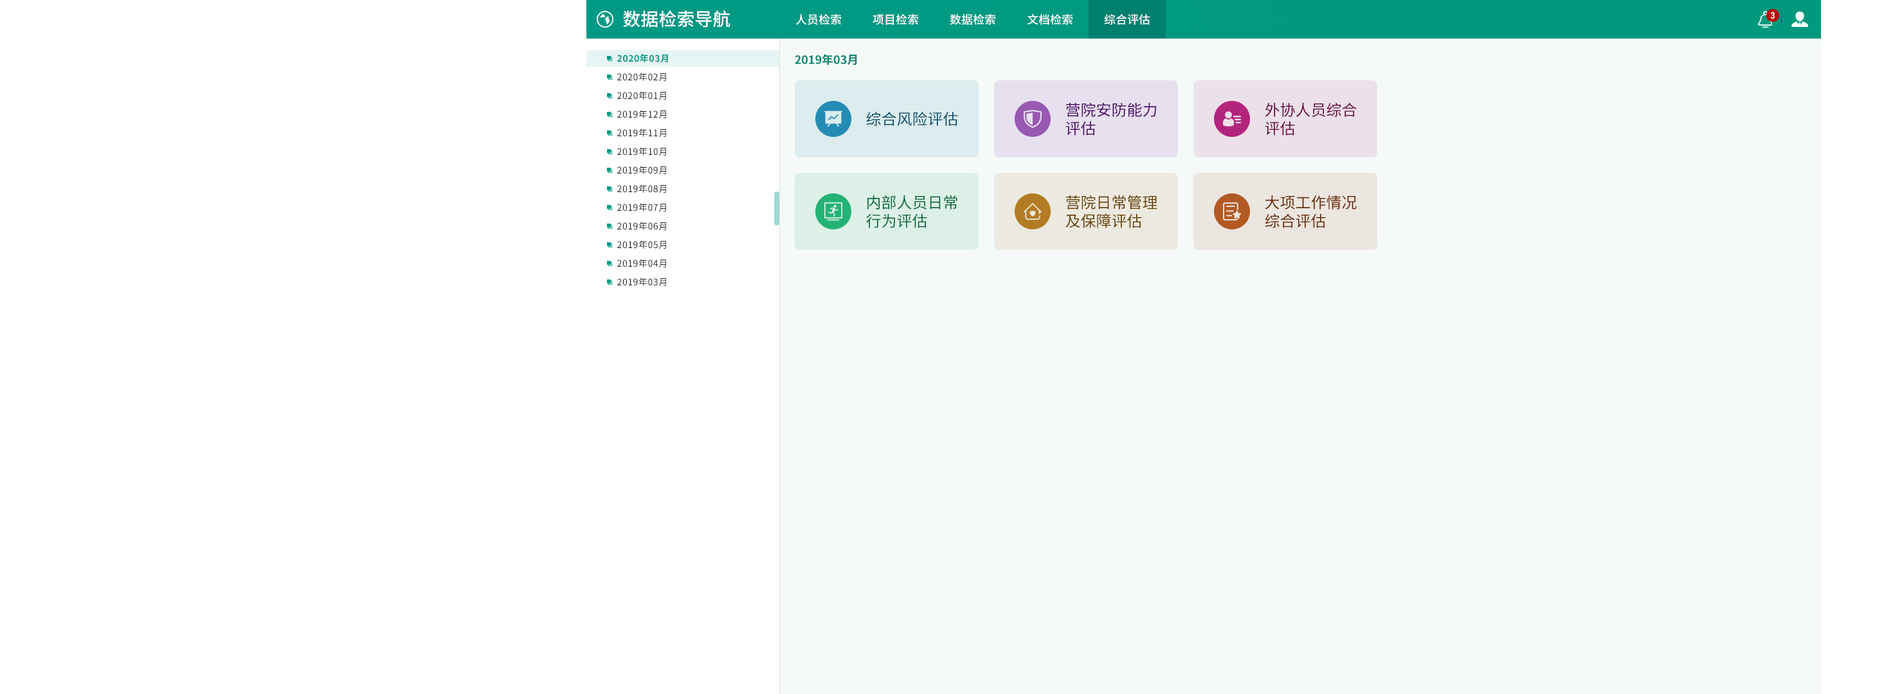
<style>
.page{position:relative;width:1893px;height:694px;background:#f5faf9}
.page>*{position:absolute;margin:0}
.t1{font:18px "NotoSansHans-Medium";color:#ffffff}
.t2{font:11.6px "NotoSansHans-Medium";color:#ffffff}
.t3{font:9px "Bahnschrift";color:#ffffff}
.t4{font:9px "NotoSansHans-Bold";letter-spacing:0.04em;color:#009985}
.t5{font:11.6px "NotoSansHans-Bold";color:#00806f}
.t6{font:9px "NotoSansHans-Regular";letter-spacing:0.04em;color:#1a1a1a}
.t7{font:15.4px "NotoSansHans-Regular";color:#004b66}
.t8{font:15.4px "NotoSansHans-Regular";color:#470066}
.t9{font:15.4px "NotoSansHans-Regular";color:#66003f}
.t10{font:15.4px "NotoSansHans-Regular";color:#00663a}
.t11{font:15.4px "NotoSansHans-Regular";color:#663f00}
.t12{font:15.4px "NotoSansHans-Regular";color:#662700}
</style>
<div class="page">
<p class="t1" style="left:623px;top:10px;width:107px;height:18px">数据检索导航</p>
<p class="t2" style="left:795px;top:14px;width:46px;height:11px">人员检索</p>
<p class="t2" style="left:872px;top:14px;width:46px;height:11px">项目检索</p>
<p class="t2" style="left:950px;top:14px;width:45px;height:11px">数据检索</p>
<p class="t2" style="left:1027px;top:14px;width:45px;height:11px">文档检索</p>
<p class="t2" style="left:1104px;top:14px;width:46px;height:11px">综合评估</p>
<p class="t3" style="left:1770px;top:12px;width:4px;height:7px">3</p>
<p class="t4" style="left:617px;top:54px;width:51px;height:9px">2020年03月</p>
<p class="t5" style="left:795px;top:54px;width:62px;height:11px">2019年03月</p>
<p class="t6" style="left:617px;top:73px;width:49px;height:9px">2020年02月</p>
<p class="t6" style="left:617px;top:91px;width:49px;height:9px">2020年01月</p>
<p class="t6" style="left:617px;top:110px;width:49px;height:9px">2019年12月</p>
<p class="t7" style="left:866px;top:111px;width:92px;height:15px">综合风险评估</p>
<p class="t8" style="left:1065px;top:102px;width:91px;height:34px">营院安防能力<br>评估</p>
<p class="t9" style="left:1264px;top:103px;width:92px;height:33px">外协人员综合<br>评估</p>
<p class="t6" style="left:617px;top:129px;width:49px;height:9px">2019年11月</p>
<p class="t6" style="left:617px;top:147px;width:49px;height:9px">2019年10月</p>
<p class="t6" style="left:617px;top:166px;width:49px;height:9px">2019年09月</p>
<p class="t6" style="left:617px;top:184px;width:49px;height:10px">2019年08月</p>
<p class="t10" style="left:866px;top:195px;width:91px;height:33px">内部人员日常<br>行为评估</p>
<p class="t11" style="left:1065px;top:195px;width:92px;height:33px">营院日常管理<br>及保障评估</p>
<p class="t12" style="left:1264px;top:195px;width:92px;height:33px">大项工作情况<br>综合评估</p>
<p class="t6" style="left:617px;top:203px;width:49px;height:9px">2019年07月</p>
<p class="t6" style="left:617px;top:222px;width:49px;height:9px">2019年06月</p>
<p class="t6" style="left:617px;top:240px;width:49px;height:9px">2019年05月</p>
<p class="t6" style="left:617px;top:259px;width:49px;height:9px">2019年04月</p>
<p class="t6" style="left:617px;top:278px;width:49px;height:9px">2019年03月</p>
</div>
